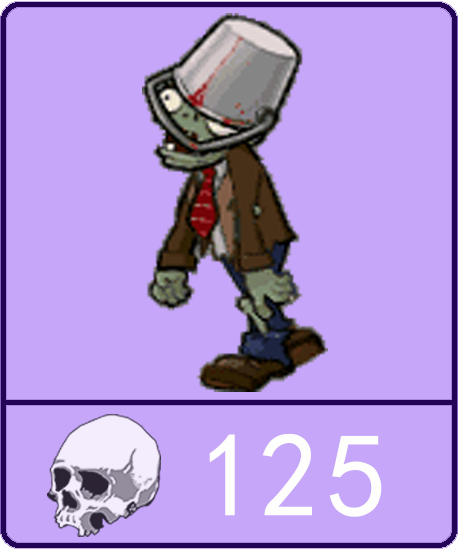
<style>
.page{position:relative;width:458px;height:550px;background:#c6a6f9}
.page>*{position:absolute;margin:0}
.t1{font:120px "SimHei";color:#fefefc}
.t2{font:120px "SimHei";letter-spacing:0.075em;color:#fefefc}
</style>
<div class="page">
<p class="t1" style="left:209px;top:433px;width:173px;height:84px">1<span class="t2">2</span>5</p>
</div>
